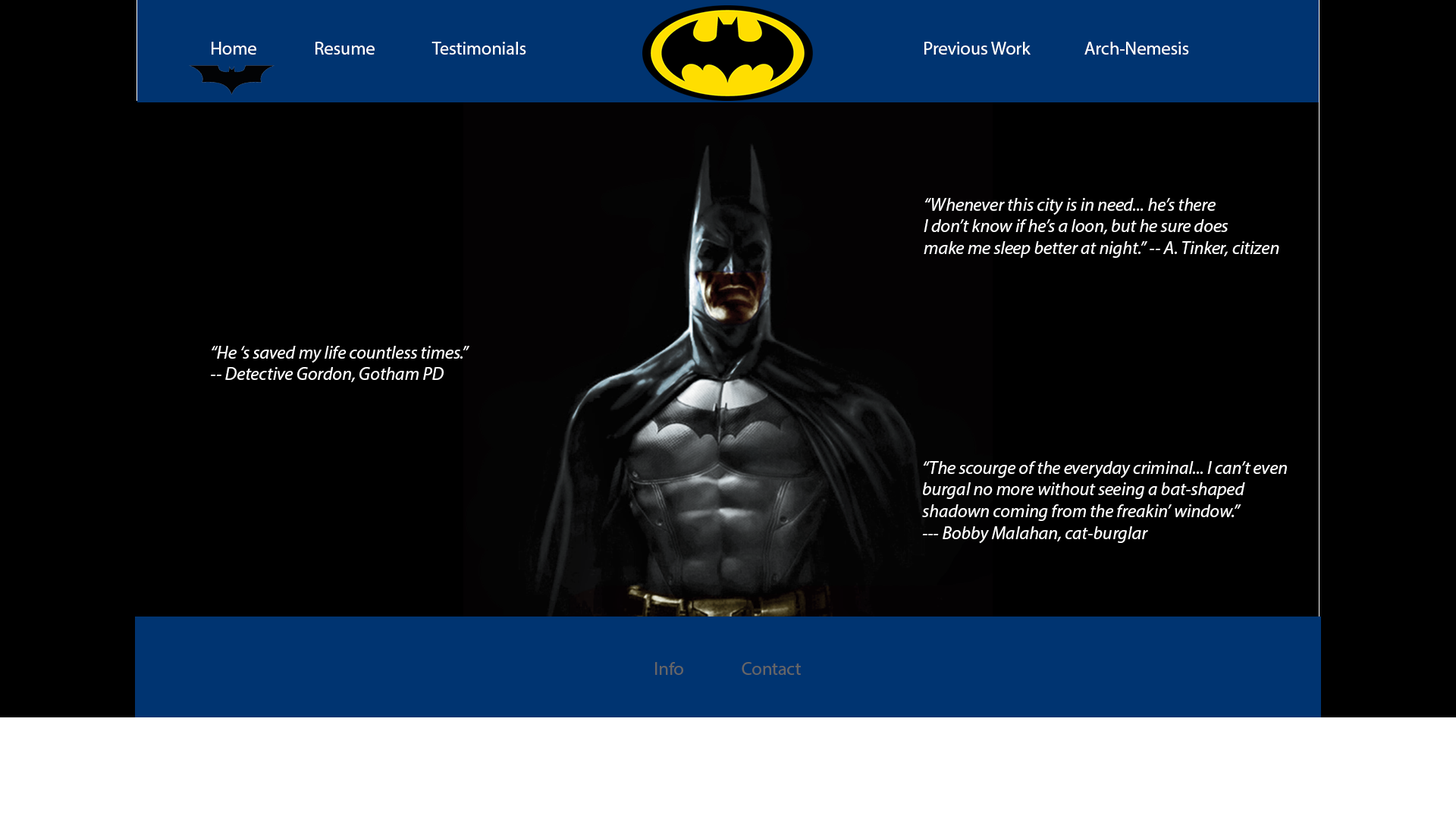
<style>
.page{position:relative;width:1456px;height:819px;background:#000000}
.page>*{position:absolute;margin:0}
.t1{font:18.2px "MyriadPro-Regular";color:#ffffff}
.t2{font:18.2px "MyriadPro-It";color:#ffffff}
.t3{font:18.2px "MyriadPro-Regular";color:#666666}
</style>
<div class="page">
<p class="t1" style="left:212px;top:42px;width:314px;height:13px">Home               Resume               Testimonials</p>
<p class="t1" style="left:924px;top:42px;width:265px;height:13px">Previous Work              Arch-Nemesis</p>
<p class="t2" style="left:924px;top:198px;width:355px;height:60px">“Whenever this city is in need... he’s there<br>I don’t know if he’s a loon, but he sure does<br>make me sleep better at night.” -- A. Tinker, citizen</p>
<p class="t2" style="left:211px;top:346px;width:258px;height:36px">“He ‘s saved my life countless times.”<br>-- Detective Gordon, Gotham PD</p>
<p class="t2" style="left:922px;top:461px;width:365px;height:83px">“The scourge of the everyday criminal... I can’t even <br>burgal no more without seeing a bat-shaped <br>shadown coming from the freakin’ window.”<br>--- Bobby Malahan, cat-burglar</p>
<p class="t3" style="left:655px;top:662px;width:146px;height:13px">Info               Contact</p>
</div>
